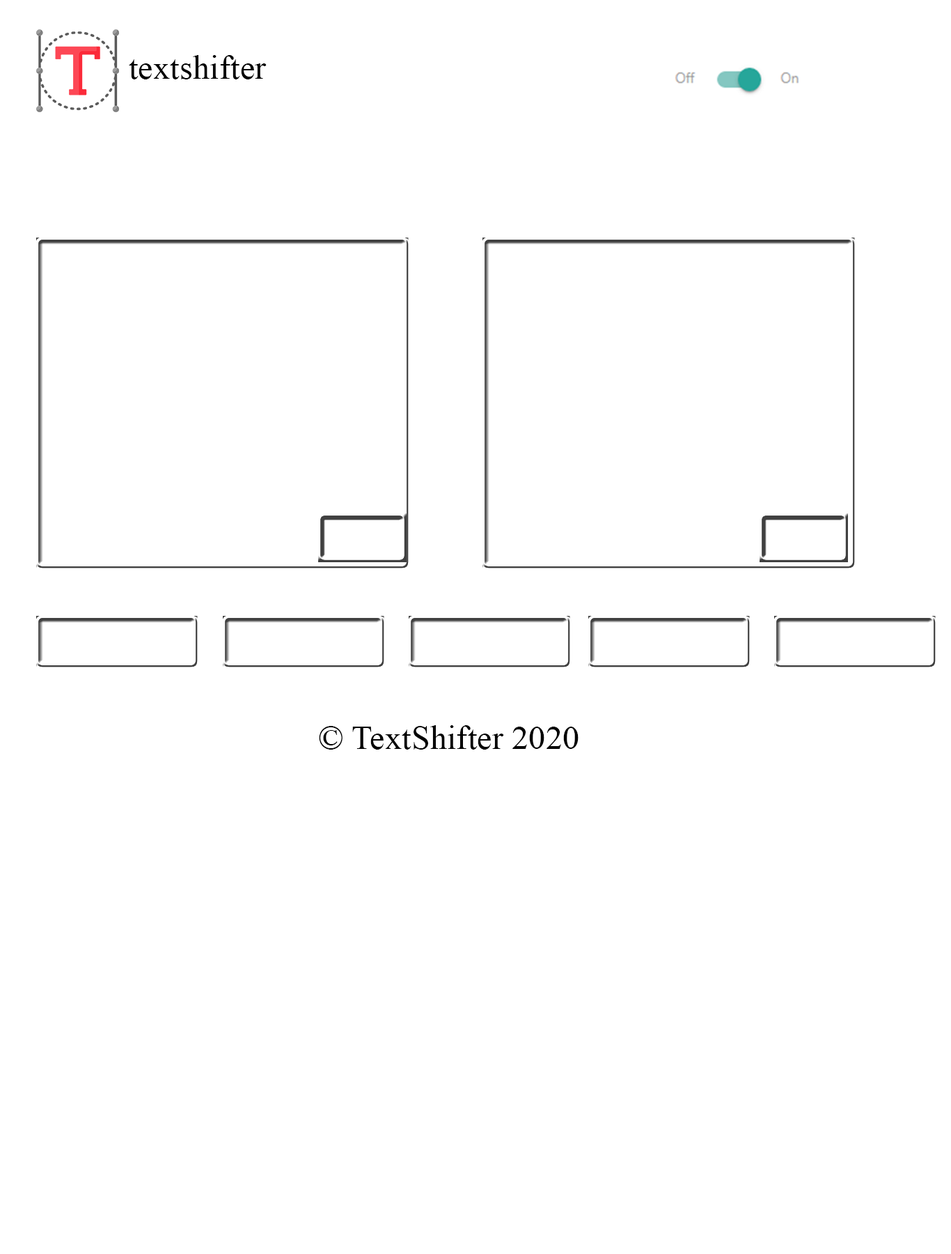
<style>
.page{position:relative;width:951px;height:1254px;background:#ffffff}
.page>*{position:absolute;margin:0}
.t1{font:33.4px "TimesNewRomanPSMT";letter-spacing:0.005em;color:#000000}
</style>
<div class="page">
<p class="t1" style="left:129px;top:55px;width:138px;height:24px">textshifter</p>
<p class="t1" style="left:319px;top:725px;width:260px;height:24px">© TextShifter 2020</p>
</div>
